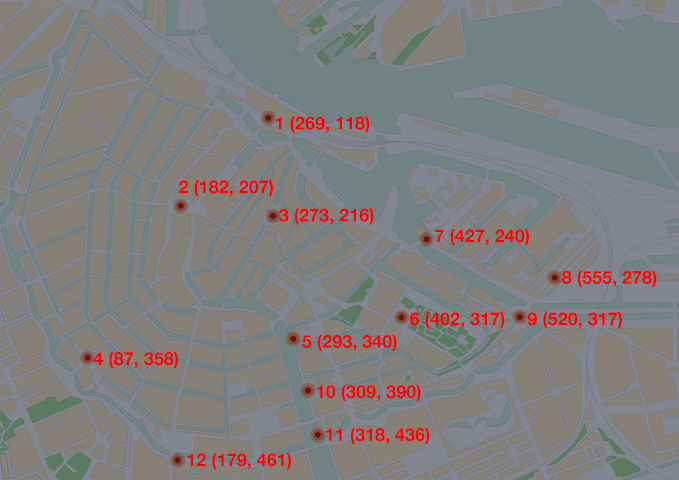
<style>
.page{position:relative;width:679px;height:480px;background:#868077}
.page>*{position:absolute;margin:0}
.t1{font:18px "HelveticaNeue-Bold";color:#ff0000}
</style>
<div class="page">
<p class="t1" style="left:275px;top:116px;width:95px;height:17px">1 (269, 118)</p>
<p class="t1" style="left:178px;top:180px;width:95px;height:17px">2 (182, 207)</p>
<p class="t1" style="left:279px;top:208px;width:95px;height:17px">3 (273, 216)</p>
<p class="t1" style="left:435px;top:229px;width:94px;height:17px">7 (427, 240)</p>
<p class="t1" style="left:562px;top:270px;width:95px;height:17px">8 (555, 278)</p>
<p class="t1" style="left:410px;top:312px;width:95px;height:17px">6 (402, 317)</p>
<p class="t1" style="left:527px;top:312px;width:95px;height:17px">9 (520, 317)</p>
<p class="t1" style="left:302px;top:334px;width:95px;height:17px">5 (293, 340)</p>
<p class="t1" style="left:93px;top:351px;width:85px;height:18px">4 (87, 358)</p>
<p class="t1" style="left:317px;top:384px;width:104px;height:18px">10 (309, 390)</p>
<p class="t1" style="left:326px;top:427px;width:104px;height:18px">11 (318, 436)</p>
<p class="t1" style="left:187px;top:453px;width:104px;height:17px">12 (179, 461)</p>
</div>
